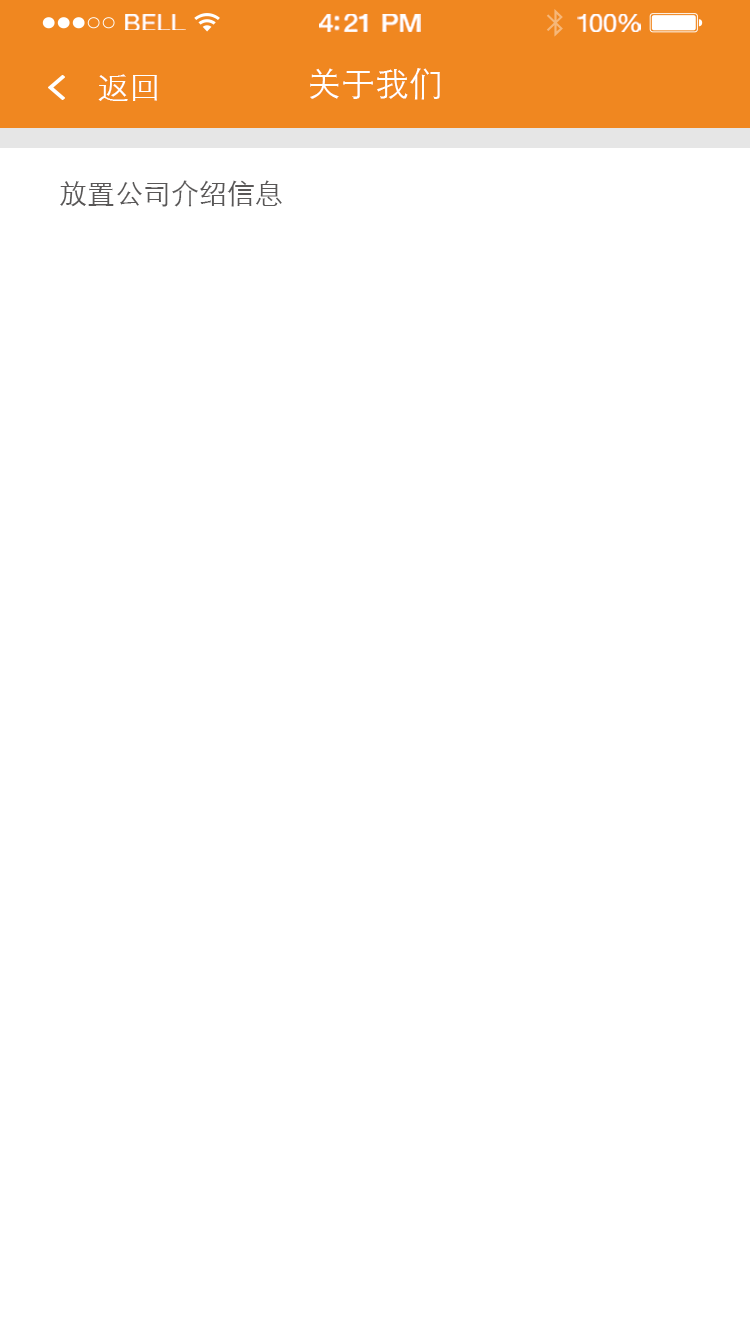
<style>
.page{position:relative;width:750px;height:1334px;background:#ffffff}
.page>*{position:absolute;margin:0}
.t1{font:23.3px "HelveticaNeue";letter-spacing:0.02em;color:#ffffff;scale:1.06 1}
.t2{font:25.3px "HelveticaNeue-Medium";letter-spacing:-0.02em;color:#ffffff;scale:1.06 1}
.t3{font:24.3px "HelveticaNeue";letter-spacing:-0.02em;color:#ffffff;scale:1.06 1}
.t4{font:32px "STXihei";color:#ffffff}
.t5{font:34px "STXihei";color:#ffffff}
.t6{font:28px "STXihei";color:#595757}
</style>
<div class="page">
<p class="t1" style="left:125px;top:14px;width:61px;height:16px">BELL</p>
<p class="t2" style="left:319px;top:14px;width:102px;height:18px">4:21 PM</p>
<p class="t3" style="left:577px;top:14px;width:64px;height:18px">100%</p>
<p class="t4" style="left:98px;top:74px;width:59px;height:27px">返回</p>
<p class="t5" style="left:310px;top:68px;width:130px;height:32px">关于我们</p>
<p class="t6" style="left:60px;top:180px;width:222px;height:27px">放置公司介绍信息</p>
</div>
